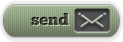
<style>
.page{position:relative;width:123px;height:42px}
.page>*{position:absolute;margin:0}
.t1{font:16px "ChunkFive-Roman";color:#3e4638}
</style>
<div class="page">
<p class="t1" style="left:31px;top:13px;width:38px;height:13px">send</p>
</div>
